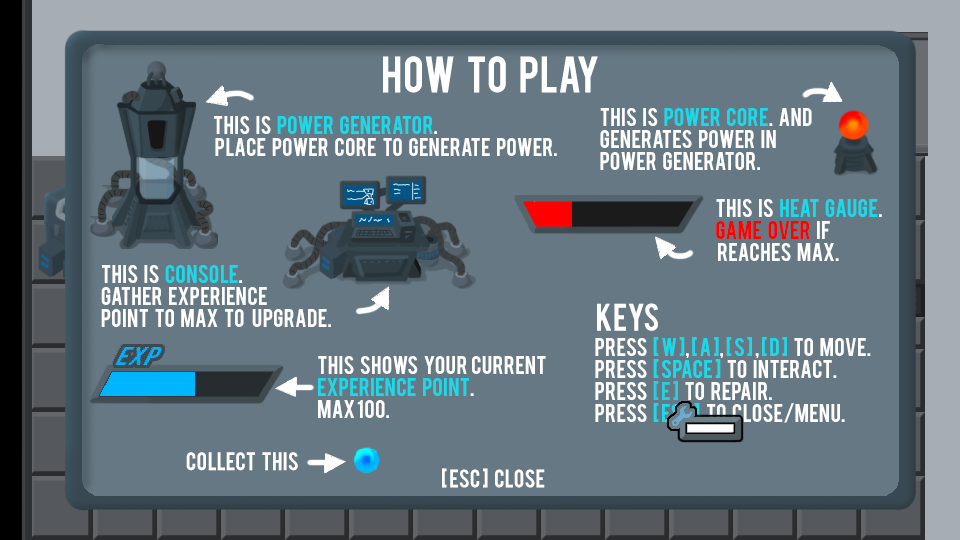
<style>
.page{position:relative;width:960px;height:540px;background:#667883}
.page>*{position:absolute;margin:0}
.t1{font:40px "Bebas";color:#ffffff}
.t2{font:20px/22px "Bebas";color:#ffffff}
.t3{font:20px/22px "Bebas";color:#18daeb}
.t4{font:20px/22px "Bebas";color:#ff0000}
.t5{font:30px "Bebas";color:#ffffff}
.t6{font:20px/22px "Bebas";color:#14ddee}
.t7{font:20px/22px "Bebas";color:#25cfdf}
.t8{font:20px "Bebas";color:#ffffff}
</style>
<div class="page">
<p class="t1" style="left:383px;top:56px;width:215px;height:37px">how   to   play</p>
<p class="t2" style="left:600px;top:108px;width:212px;height:62px">this   is   <span class="t3">power   core</span>.   and   <br>generates   power   in   <br>power   generator.</p>
<p class="t2" style="left:214px;top:116px;width:343px;height:40px">this   is   <span class="t3">power   generator</span>.  <br> place   power   core   to   generate   power.</p>
<p class="t2" style="left:716px;top:199px;width:166px;height:62px">this   is   <span class="t3">heat   gauge</span>.<br><span class="t4">game   over</span>   if  <br> reaches   max.</p>
<p class="t2" style="left:101px;top:265px;width:230px;height:62px">this   is   <span class="t3">console</span>.   <br>Gather   experience   <br>point   to   max   to    upgrade.</p>
<p class="t5" style="left:597px;top:303px;width:61px;height:28px">keys</p>
<p class="t2" style="left:595px;top:337px;width:276px;height:86px">press   <span class="t3">[ w ]</span>, <span class="t3">[ a ]</span>, <span class="t3">[ s ]</span> ,<span class="t3"> [ d ]  </span> to   move.<br>press   <span class="t6">[ space ] </span>  to   interact.<br>press   <span class="t7">[ E ] </span>  to   repair.<br>press   <span class="t6">[ esc ] </span>  to   close/menu.</p>
<p class="t2" style="left:318px;top:356px;width:228px;height:62px">this   shows   your  current<br><span class="t3">experience   point</span>.<br>max 100.</p>
<p class="t8" style="left:186px;top:452px;width:112px;height:19px">collect   this</p>
<p class="t8" style="left:442px;top:468px;width:103px;height:20px">[ ESC ]   close</p>
</div>
